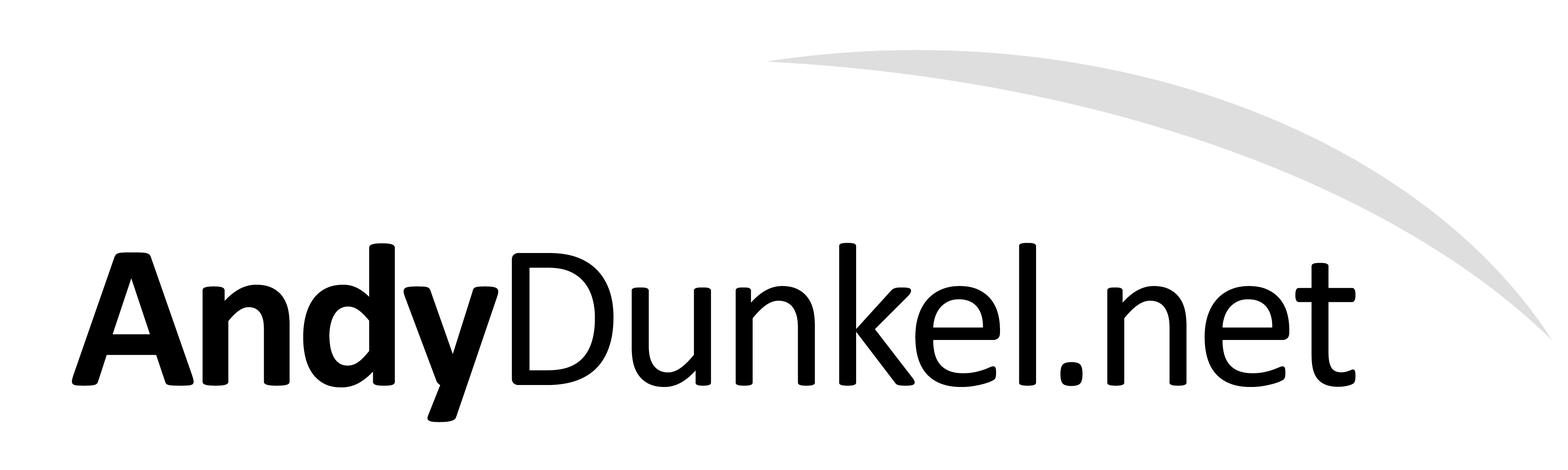
<style>
.page{position:relative;width:1568px;height:470px;background:#ffffff}
.page>*{position:absolute;margin:0}
.t1{font:209.1px "Calibri";letter-spacing:-0.03em;color:#000000}
.t2{font:209.1px "Calibri-Bold";letter-spacing:-0.03em;color:#000000}
</style>
<div class="page">
<p class="t1" style="left:72px;top:243px;width:1284px;height:180px"><span class="t2">Andy</span>Dunkel.net</p>
</div>
